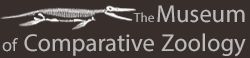
<style>
.page{position:relative;width:250px;height:58px;background:#382f2d}
.page>*{position:absolute;margin:0}
.t1{font:24.6px/29px "MyriadPro-Regular";color:#bbb9b9}
.t2{font:13px/29px "MyriadPro-Regular";letter-spacing:0.005em;color:#bbb9b9}
.t3{font:18px/29px "MyriadPro-Regular";letter-spacing:0.005em;color:#bbb9b9}
</style>
<div class="page">
<p class="t1" style="left:2px;top:5px;width:244px;height:52px;text-align:right"><span class="t2">The </span>Museum<br> <span class="t3">of </span>Comparative Zoology</p>
</div>
